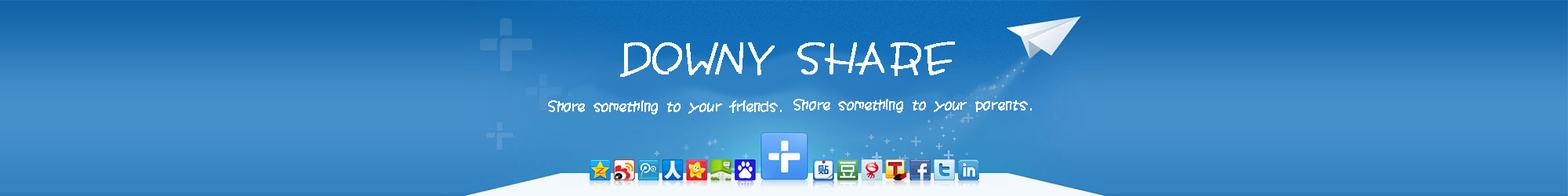
<style>
.page{position:relative;width:1568px;height:196px}
.page>*{position:absolute;margin:0}
.t1{font:47px "JYaYa";color:#ffffff;font-weight:bold;font-style:italic;scale:0.9 1}
.t2{font:15.7px "JYaYa";color:#ffffff;font-weight:bold;font-style:italic;scale:0.9 1}
</style>
<div class="page">
<p class="t1" style="left:620px;top:42px;width:335px;height:35px">DOWNY SHARE</p>
<p class="t2" style="left:548px;top:100px;width:234px;height:14px">Share something to your friends.</p>
<p class="t2" style="left:793px;top:99px;width:239px;height:14px">Share something to your parents.</p>
</div>
